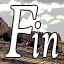
<style>
.page{position:relative;width:64px;height:64px}
.page>*{position:absolute;margin:0}
.t1{font:77.6px "Monarcha-Italic";letter-spacing:-0.03em;color:#ffffff;scale:0.67 1}
.t2{font:48.5px "Monarcha-Italic";letter-spacing:0.015em;color:#ffffff;scale:0.67 1}
.t3{font:48.5px "Monarcha-Italic";letter-spacing:-0.025em;color:#ffffff;scale:0.67 1}
</style>
<div class="page">
<p class="t1" style="left:5px;top:5px;width:54px;height:53px">F<span class="t2">i</span><span class="t3">n</span></p>
</div>
